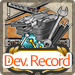
<style>
.page{position:relative;width:75px;height:75px}
.page>*{position:absolute;margin:0}
.t1{font:16px "AdobeClean-Regular";letter-spacing:-0.08em;color:#ff5a00}
</style>
<div class="page">
<p class="t1" style="left:4px;top:54px;width:66px;height:13px">Dev. Record</p>
</div>
